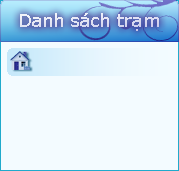
<style>
.page{position:relative;width:179px;height:171px;background:#f3fbff}
.page>*{position:absolute;margin:0}
.t1{font:18px "Verdana";color:#e2e3f3}
</style>
<div class="page">
<p class="t1" style="left:20px;top:13px;width:139px;height:18px">Danh sách trạm</p>
</div>
